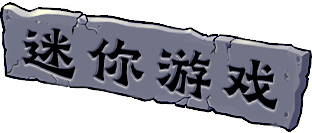
<style>
.page{position:relative;width:312px;height:133px;background:#ffffff}
.page>*{position:absolute;margin:0}
.t1{font:64.2px "GraveBustedStoneLishuSCRoughlyC";letter-spacing:0.14em;color:#000000}
</style>
<div class="page">
<p class="t1" style="left:23px;top:28px;width:255px;height:82px;rotate:9deg">迷你游戏</p>
</div>
